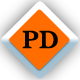
<style>
.page{position:relative;width:80px;height:80px;background:#ff6c00}
.page>*{position:absolute;margin:0}
.t1{font:26px "Baskerville-SemiBold";color:#060300}
</style>
<div class="page">
<p class="t1" style="left:22px;top:30px;width:36px;height:19px">PD</p>
</div>
